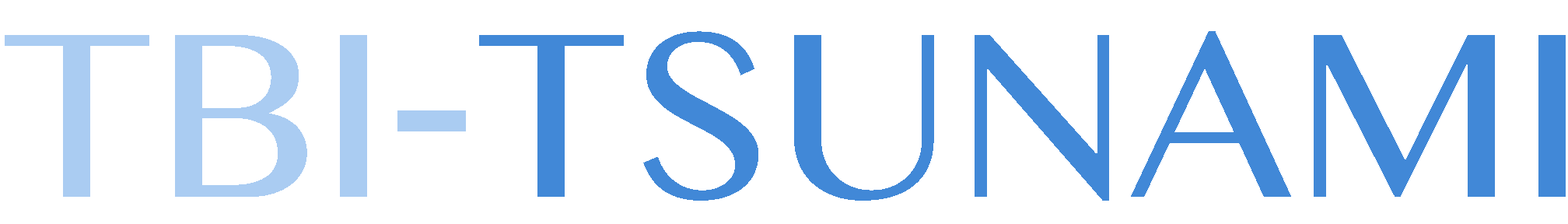
<style>
.page{position:relative;width:1568px;height:224px;background:#ffffff}
.page>*{position:absolute;margin:0}
.t1{font:249.3px "MalayalamMN";color:#4188d7}
.t2{font:249.3px "MalayalamMN";color:#aaccf2}
.t3{font:249.3px "AdobeHeitiStd-Regular";color:#aaccf2}
</style>
<div class="page">
<p class="t1" style="left:5px;top:31px;width:1561px;height:170px"><span class="t2">TBI</span><span class="t3">-</span>TSUNAMI</p>
</div>
